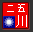
<style>
.page{position:relative;width:33px;height:32px;background:#f20000}
.page>*{position:absolute;margin:0}
.t1{font:10.4px "SimSun";color:#ffffff}
.t2{font:11.7px "SimSun";color:#ffffff}
</style>
<div class="page">
<p class="t1" style="left:7px;top:4px;width:18px;height:8px">二五</p>
<p class="t2" style="left:16px;top:15px;width:11px;height:12px">川</p>
</div>
